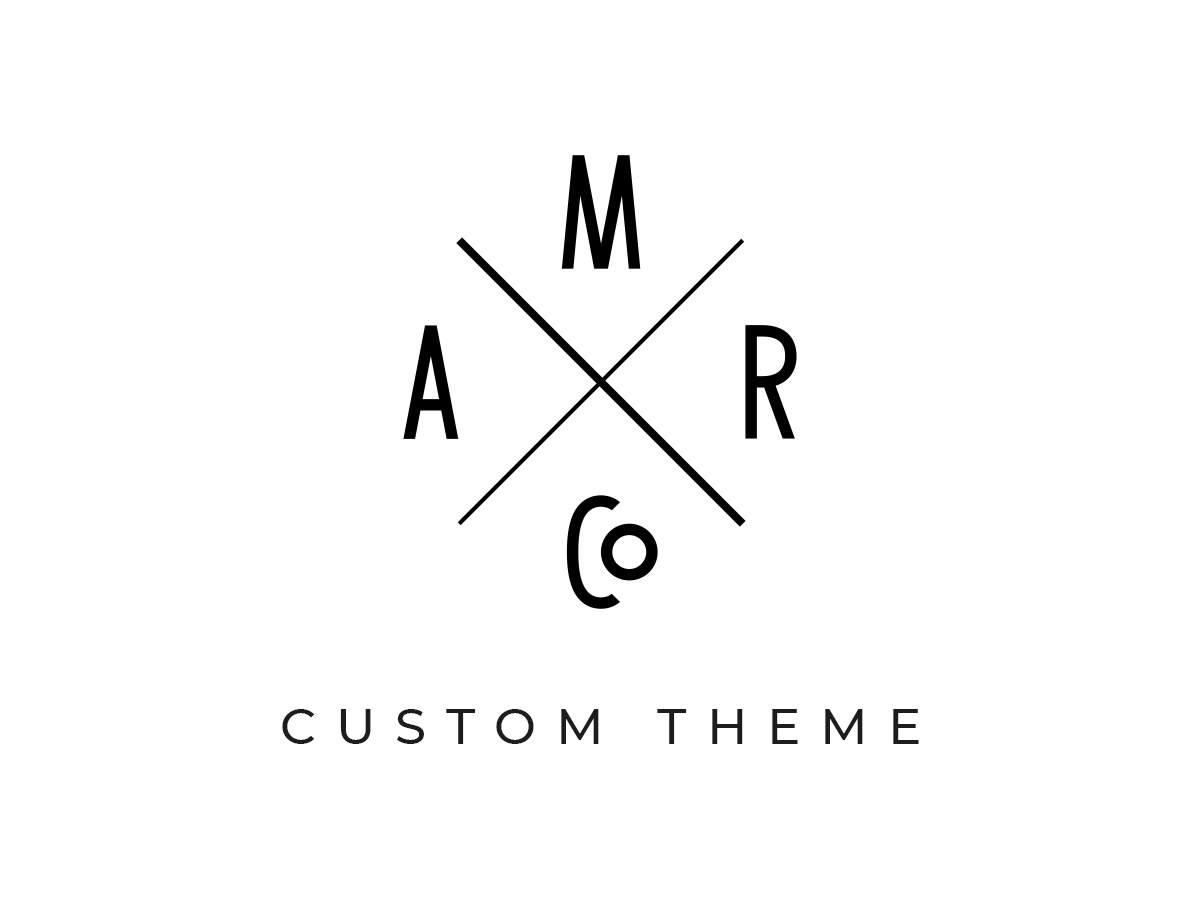
<style>
.page{position:relative;width:1200px;height:900px;background:#ffffff}
.page>*{position:absolute;margin:0}
.t1{font:49.9px "Montserrat-Medium";letter-spacing:0.4em;color:#1e1d1d;text-transform:uppercase}
</style>
<div class="page">
<p class="t1" style="left:282px;top:709px;width:637px;height:35px">CUSTOM THEME</p>
</div>
